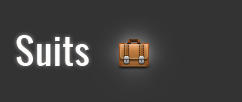
<style>
.page{position:relative;width:242px;height:102px;background:#333333}
.page>*{position:absolute;margin:0}
.t1{font:35px "Oswald";color:#ffffff}
</style>
<div class="page">
<p class="t1" style="left:16px;top:35px;width:73px;height:31px">Suits</p>
</div>
